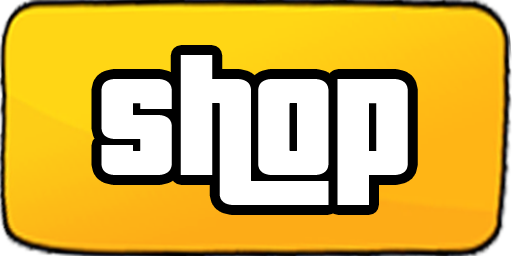
<style>
.page{position:relative;width:512px;height:256px;background:#ffffff}
.page>*{position:absolute;margin:0}
.t1{font:150px "PricedownBl-Regular";letter-spacing:0.012em;color:#ffffff}
</style>
<div class="page">
<p class="t1" style="left:101px;top:55px;width:307px;height:150px">Shop</p>
</div>
